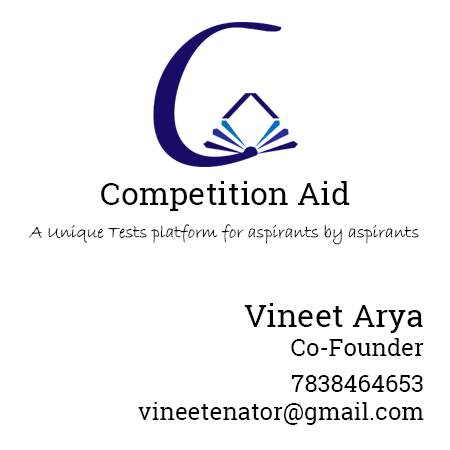
<style>
.page{position:relative;width:450px;height:450px;background:#ffffff}
.page>*{position:absolute;margin:0}
.t1{font:32px "RobotoSlab-Regular";color:#000000}
.t2{font:18px "BradleyHandITC";color:#000000}
.t3{font:24px "RobotoSlab-Regular";color:#000000}
</style>
<div class="page">
<p class="t1" style="left:101px;top:181px;width:249px;height:30px">Competition Aid</p>
<p class="t2" style="left:29px;top:224px;width:390px;height:21px">A Unique Tests platform for aspirants by aspirants</p>
<p class="t1" style="left:244px;top:303px;width:179px;height:30px">Vineet Arya</p>
<p class="t3" style="left:291px;top:338px;width:133px;height:18px">Co-Founder</p>
<p class="t3" style="left:291px;top:375px;width:132px;height:17px">7838464653</p>
<p class="t3" style="left:138px;top:402px;width:286px;height:23px">vineetenator@gmail.com</p>
</div>
